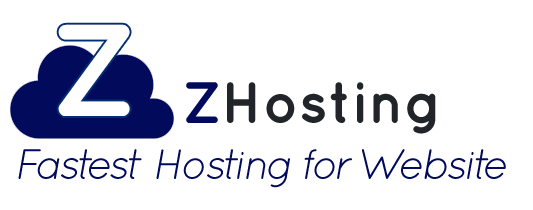
<style>
.page{position:relative;width:533px;height:210px;background:#ffffff}
.page>*{position:absolute;margin:0}
.t1{font:130.1px "Quicksand-Bold";letter-spacing:-0.06em;color:#ffffff}
.t2{font:58.3px "Quicksand-Bold";color:#212529}
.t3{font:58.3px "Quicksand-Bold";color:#020b5b}
.t4{font:42.6px "Quicksand-Italic";letter-spacing:-0.06em;color:#020b5b}
</style>
<div class="page">
<p class="t1" style="left:58px;top:24px;width:72px;height:92px">Z</p>
<p class="t2" style="left:186px;top:82px;width:250px;height:52px"><span class="t3">Z</span>Hosting</p>
<p class="t4" style="left:18px;top:149px;width:488px;height:39px">Fastest Hosting for Website</p>
</div>
